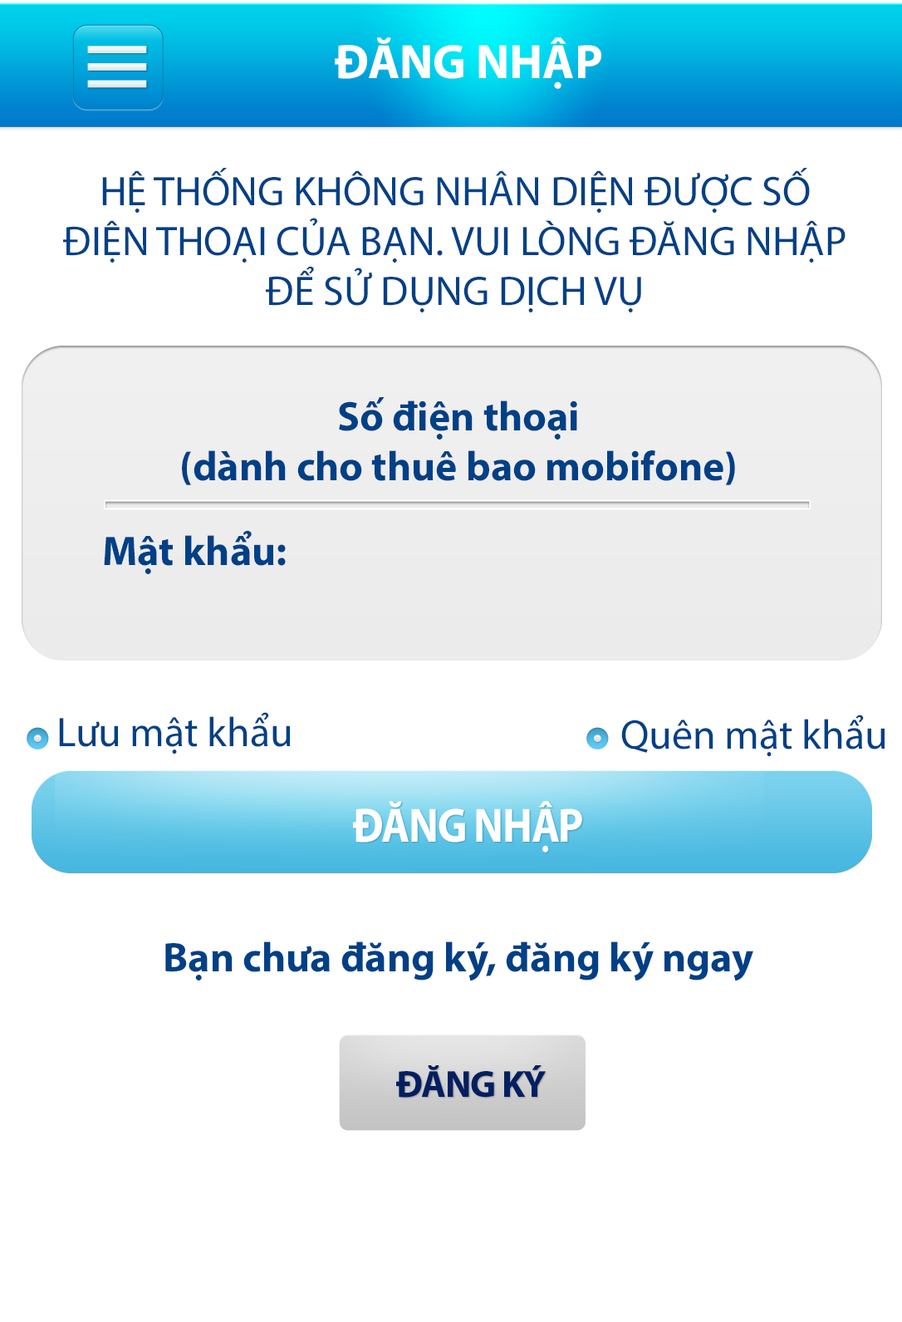
<style>
.page{position:relative;width:902px;height:1322px;background:#ffffff}
.page>*{position:absolute;margin:0}
.t1{font:48.5px "MyriadPro-Bold";color:#ffffff}
.t2{font:41.5px "MyriadPro-Regular";color:#004086}
.t3{font:41.5px "MyriadPro-Bold";color:#004086}
.t4{font:48.5px "MyriadPro-Bold";letter-spacing:-0.025em;color:#ffffff;scale:0.89 1}
.t5{font:37.8px "MyriadPro-Bold";letter-spacing:-0.025em;color:#011f61}
</style>
<div class="page">
<p class="t1" style="left:335px;top:37px;width:266px;height:52px">ĐĂNG NHẬP</p>
<p class="t2" style="left:63px;top:167px;width:783px;height:145px;text-align:center">HỆ THỐNG KHÔNG NHÂN DIỆN ĐƯỢC SỐ ĐIỆN THOẠI CỦA BẠN. VUI LÒNG ĐĂNG NHẬP ĐỂ SỬ DỤNG DỊCH VỤ</p>
<p class="t3" style="left:182px;top:397px;width:553px;height:88px;text-align:center">Số điện thoại <br>(dành cho thuê bao mobifone)</p>
<p class="t3" style="left:104px;top:530px;width:182px;height:44px">Mật khẩu:</p>
<p class="t2" style="left:59px;top:712px;width:232px;height:42px">Lưu mật khẩu</p>
<p class="t2" style="left:621px;top:714px;width:265px;height:43px">Quên mật khẩu</p>
<p class="t4" style="left:353px;top:801px;width:229px;height:51px">ĐĂNG NHẬP</p>
<p class="t3" style="left:165px;top:941px;width:588px;height:40px">Bạn chưa đăng ký, đăng ký ngay</p>
<p class="t5" style="left:396px;top:1065px;width:150px;height:32px">ĐĂNG KÝ</p>
</div>
